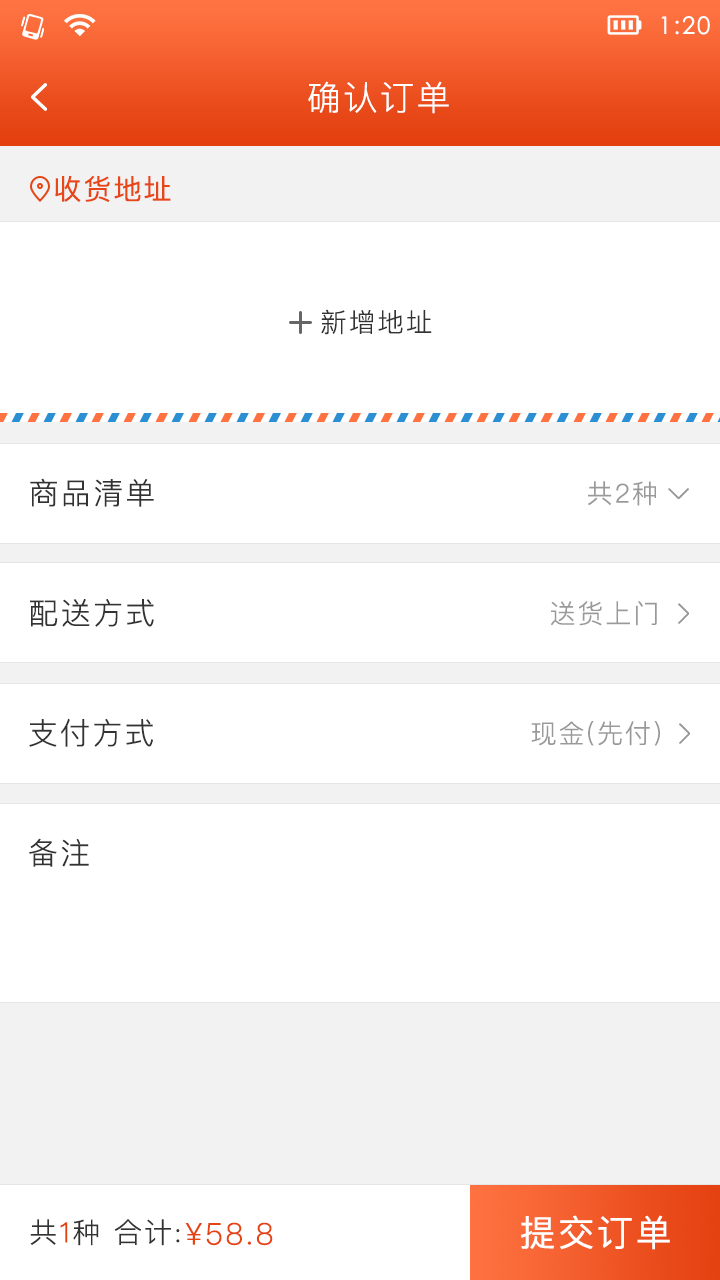
<style>
.page{position:relative;width:720px;height:1280px;background:#ffffff}
.page>*{position:absolute;margin:0}
.t1{font:24px "STXihei";letter-spacing:0.075em;color:#ffffff}
.t2{font:34px "PingFangSC-Light";letter-spacing:0.075em;color:#ffffff}
.t3{font:28px "PingFangSC-Regular";letter-spacing:0.075em;color:#e74616}
.t4{font:26px "PingFangSC-Light";letter-spacing:0.1em;color:#333333}
.t5{font:26px "PingFangSC-Light";letter-spacing:0.1em;color:#2d8fd3}
.t6{font:30px "PingFangSC-Light";letter-spacing:0.075em;color:#333333}
.t7{font:26px "PingFangSC-Light";letter-spacing:0.075em;color:#999999}
.t8{font:36px "PingFangSC-Regular";letter-spacing:0.075em;color:#ffffff}
.t9{font:28px "PingFangSC-Light";letter-spacing:0.075em;color:#333333}
.t10{font:28px "PingFangSC-Light";letter-spacing:0.075em;color:#e44111}
.t11{font:30px "PingFangSC-Light";letter-spacing:0.075em;color:#e54312}
</style>
<div class="page">
<p class="t1" style="left:661px;top:16px;width:49px;height:19px">1:20</p>
<p class="t2" style="left:308px;top:81px;width:141px;height:33px">确认订单</p>
<p class="t3" style="left:55px;top:175px;width:116px;height:27px">收货地址</p>
<p class="t4" style="left:321px;top:309px;width:111px;height:26px"><span class="t5"><br></span>新增地址</p>
<p class="t6" style="left:30px;top:478px;width:124px;height:29px">商品清单</p>
<p class="t7" style="left:588px;top:481px;width:68px;height:25px">共2种</p>
<p class="t6" style="left:30px;top:599px;width:124px;height:28px">配送方式</p>
<p class="t7" style="left:551px;top:601px;width:106px;height:25px">送货上门</p>
<p class="t6" style="left:29px;top:718px;width:124px;height:29px">支付方式</p>
<p class="t7" style="left:531px;top:721px;width:129px;height:25px">现金(先付)</p>
<p class="t6" style="left:29px;top:838px;width:60px;height:29px">备注</p>
<p class="t8" style="left:521px;top:1215px;width:149px;height:35px">提交订单</p>
<p class="t9" style="left:30px;top:1219px;width:150px;height:27px">共<span class="t10">1</span>种 合计:</p>
<p class="t11" style="left:185px;top:1222px;width:88px;height:24px">¥58.8</p>
</div>
